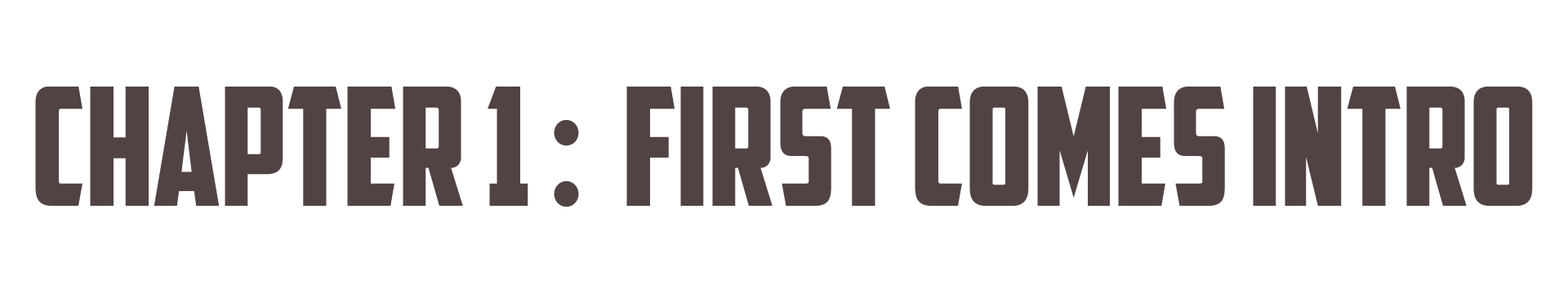
<style>
.page{position:relative;width:1568px;height:294px;background:#ffffff}
.page>*{position:absolute;margin:0}
.t1{font:164.9px "AmericanCaptain";color:#524343;scale:0.94 1}
</style>
<div class="page">
<p class="t1" style="left:35px;top:87px;width:1498px;height:120px">chapter 1 :  first comes intro</p>
</div>
